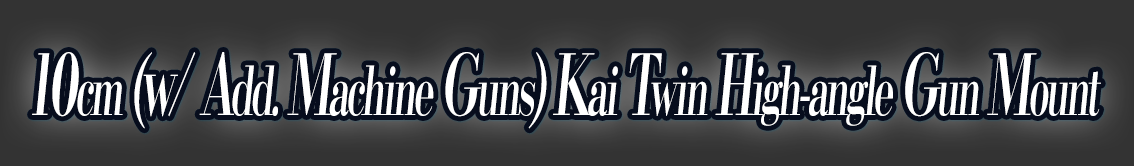
<style>
.page{position:relative;width:1134px;height:166px;background:#333333}
.page>*{position:absolute;margin:0}
.t1{font:67.2px "KochoStd-Heavy";letter-spacing:-0.08em;color:#ffffff;font-style:italic;scale:0.57 1}
.t2{font:84px "KochoStd-Heavy";letter-spacing:-0.08em;color:#ffffff;font-style:italic;scale:0.57 1}
</style>
<div class="page">
<p class="t1" style="left:32px;top:52px;width:1069px;height:77px"><span class="t2">10</span>cm <span class="t2">(w/ A</span>dd. <span class="t2">M</span>achine <span class="t2">G</span>uns<span class="t2">) K</span>ai <span class="t2">T</span>win <span class="t2">H</span>igh-angle <span class="t2">G</span>un <span class="t2">M</span>ount</p>
</div>
